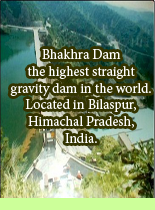
<style>
.page{position:relative;width:155px;height:210px}
.page>*{position:absolute;margin:0}
.t1{font:14px "MinionPro-Regular";color:#ffffff}
</style>
<div class="page">
<p class="t1" style="left:10px;top:49px;width:141px;height:94px;text-align:center">Bhakhra Dam<br>the highest straight<br>gravity dam in the world.<br>Located in Bilaspur,<br>Himachal Pradesh,<br>India.</p>
</div>
